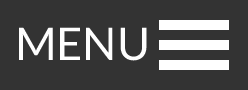
<style>
.page{position:relative;width:248px;height:90px;background:#333333}
.page>*{position:absolute;margin:0}
.t1{font:45px "Lato-Regular";color:#fefefe}
</style>
<div class="page">
<p class="t1" style="left:19px;top:27px;width:128px;height:34px">MENU</p>
</div>
